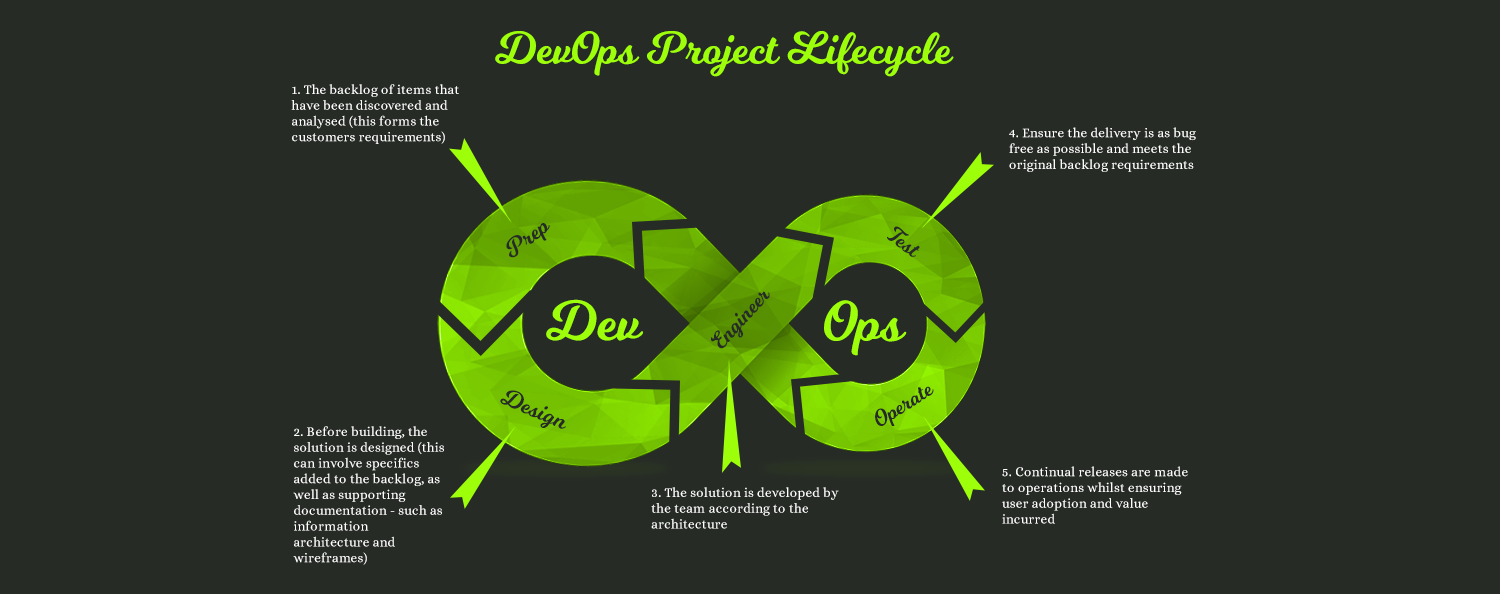
<style>
.page{position:relative;width:1500px;height:594px;background:#262b25}
.page>*{position:absolute;margin:0}
.t1{font:45px "Milkshake";color:#9dff0a}
.t2{font:13.1px "Alice-Regular";letter-spacing:0.025em;color:#ffffff}
.t3{font:24px "Milkshake";color:#262b25}
.t4{font:22.5px "Milkshake";color:#262b25}
.t5{font:55.5px "Milkshake";color:#9dff0a}
</style>
<div class="page">
<p class="t1" style="left:495px;top:31px;width:459px;height:46px">DevOps Project Lifecycle</p>
<p class="t2" style="left:291px;top:84px;width:168px;height:60px">1. The backlog of items that have been discovered and analysed (this forms the customers requirements)</p>
<p class="t2" style="left:1009px;top:127px;width:187px;height:45px">4. Ensure the delivery is as bug free as possible and meets the original backlog requirements</p>
<p class="t3" style="left:506px;top:223px;width:44px;height:35px;rotate:-39deg">Prep</p>
<p class="t4" style="left:887px;top:226px;width:33px;height:31px;rotate:36deg">Test</p>
<p class="t4" style="left:711px;top:291px;width:59px;height:58px;rotate:-48deg">Engineer</p>
<p class="t5" style="left:546px;top:299px;width:97px;height:42px">Dev</p>
<p class="t5" style="left:824px;top:300px;width:83px;height:56px">Ops</p>
<p class="t3" style="left:500px;top:390px;width:66px;height:39px;rotate:23deg">Design</p>
<p class="t4" style="left:875px;top:386px;width:59px;height:40px;rotate:-33deg">Operate</p>
<p class="t2" style="left:293px;top:426px;width:151px;height:139px">2. Before building, the solution is designed (this can involve specifics added to the backlog, as well as supporting documentation - such as information architecture and wireframes)</p>
<p class="t2" style="left:1002px;top:466px;width:186px;height:58px">5. Continual releases are made to operations whilst ensuring user adoption and value incurred</p>
<p class="t2" style="left:651px;top:487px;width:188px;height:42px">3. The solution is developed by the team according to the architecture</p>
</div>
